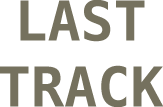
<style>
.page{position:relative;width:163px;height:107px;background:#ffffff}
.page>*{position:absolute;margin:0}
.t1{font:55px "Menlo-Bold";color:#75715e}
</style>
<div class="page">
<p class="t1" style="left:0px;top:0px;width:163px;height:107px;text-align:center">LAST<br>TRACK</p>
</div>
